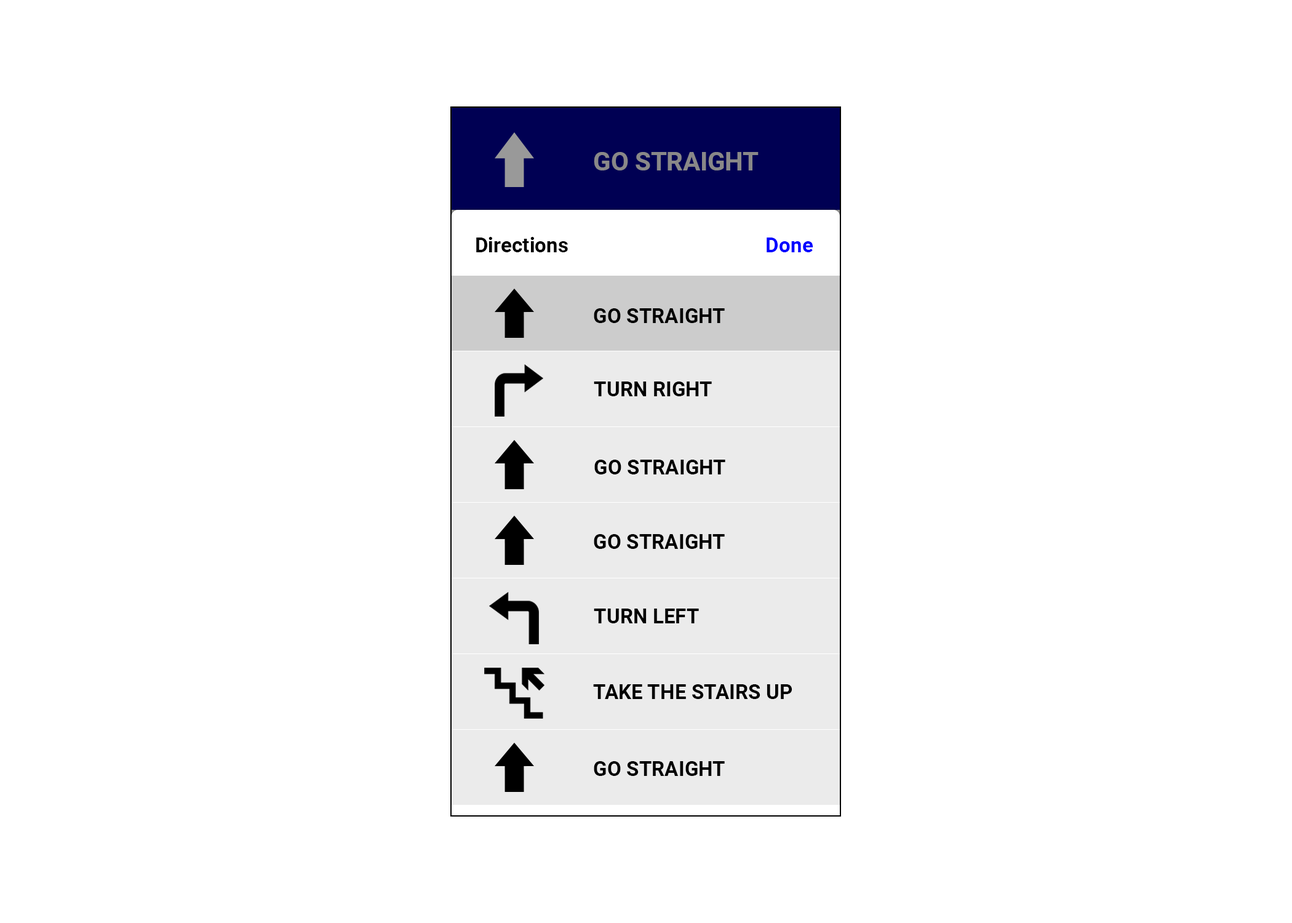
<style>
.page{position:relative;width:1292px;height:923px;background:#ffffff}
.page>*{position:absolute;margin:0}
.t1{font:25.6px "Roboto-Bold";color:#898888}
.t2{font:20.5px "Roboto-Bold";color:#000000}
.t3{font:20.5px "Roboto-Bold";color:#0000ff}
</style>
<div class="page">
<p class="t1" style="left:594px;top:152px;width:165px;height:18px">GO STRAIGHT</p>
<p class="t2" style="left:476px;top:237px;width:92px;height:15px">Directions</p>
<p class="t3" style="left:767px;top:237px;width:46px;height:15px">Done</p>
<p class="t2" style="left:594px;top:308px;width:131px;height:15px">GO STRAIGHT</p>
<p class="t2" style="left:594px;top:381px;width:118px;height:15px">TURN RIGHT</p>
<p class="t2" style="left:594px;top:460px;width:131px;height:14px">GO STRAIGHT</p>
<p class="t2" style="left:594px;top:534px;width:131px;height:15px">GO STRAIGHT</p>
<p class="t2" style="left:594px;top:608px;width:105px;height:15px">TURN LEFT</p>
<p class="t2" style="left:593px;top:684px;width:199px;height:15px">TAKE THE STAIRS UP</p>
<p class="t2" style="left:594px;top:761px;width:131px;height:15px">GO STRAIGHT</p>
</div>
